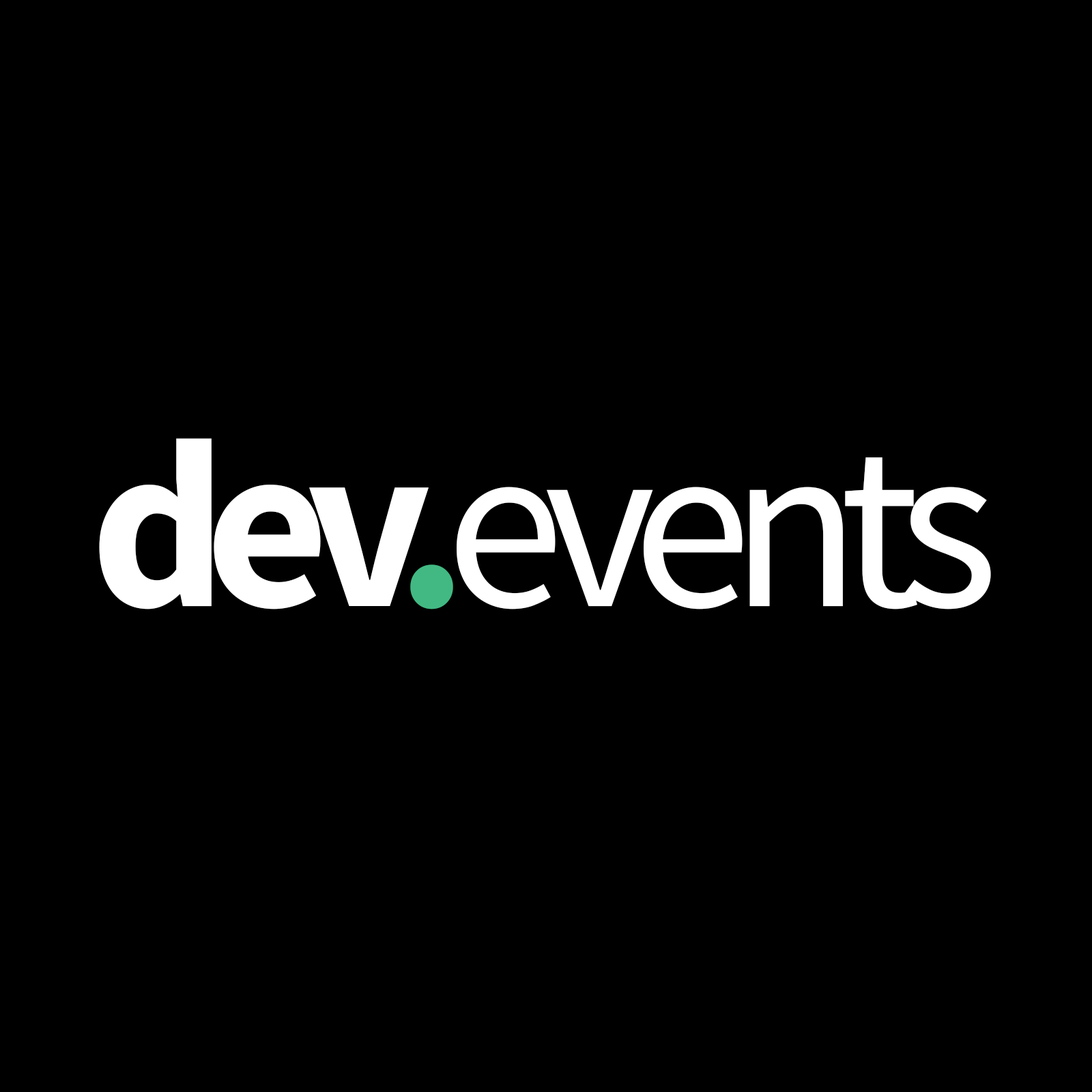
<style>
.page{position:relative;width:1092px;height:1092px;background:#000000}
.page>*{position:absolute;margin:0}
.t1{font:238.9px "SourceSansPro-Regular";letter-spacing:-0.09em;color:#ffffff}
.t2{font:238.9px "SourceSansPro-Bold";letter-spacing:-0.09em;color:#ffffff}
.t3{font:238.9px "SourceSansPro-Bold";letter-spacing:-0.09em;color:#42b983}
</style>
<div class="page">
<p class="t1" style="left:99px;top:438px;width:892px;height:171px"><span class="t2">dev</span><span class="t3">.</span>events</p>
</div>
